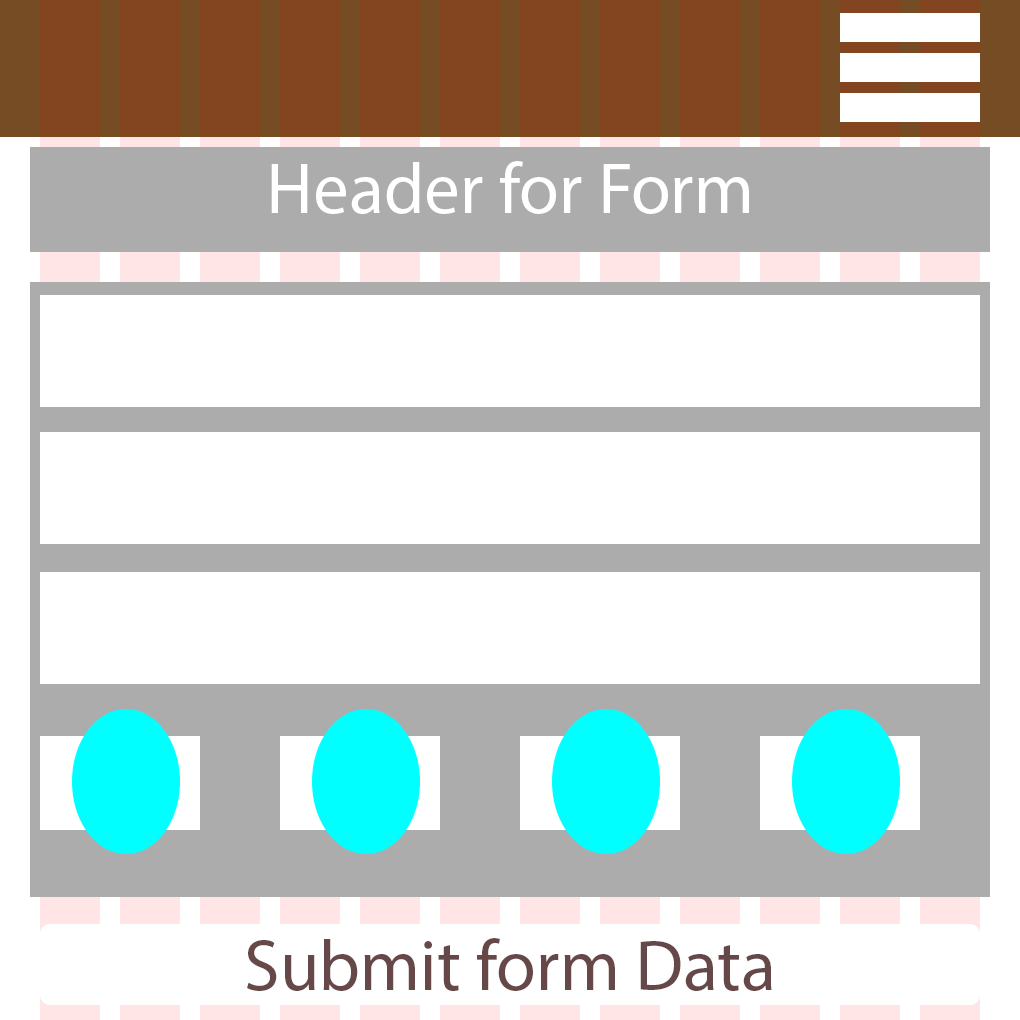
<style>
.page{position:relative;width:1020px;height:1020px;background:#ffffff}
.page>*{position:absolute;margin:0}
.t1{font:72px "MyriadPro-Regular";color:#ffffff}
.t2{font:72px "MyriadPro-Regular";color:#664848}
</style>
<div class="page">
<p class="t1" style="left:271px;top:161px;width:478px;height:53px">Header for Form</p>
<p class="t2" style="left:247px;top:938px;width:525px;height:53px">Submit form Data</p>
</div>
